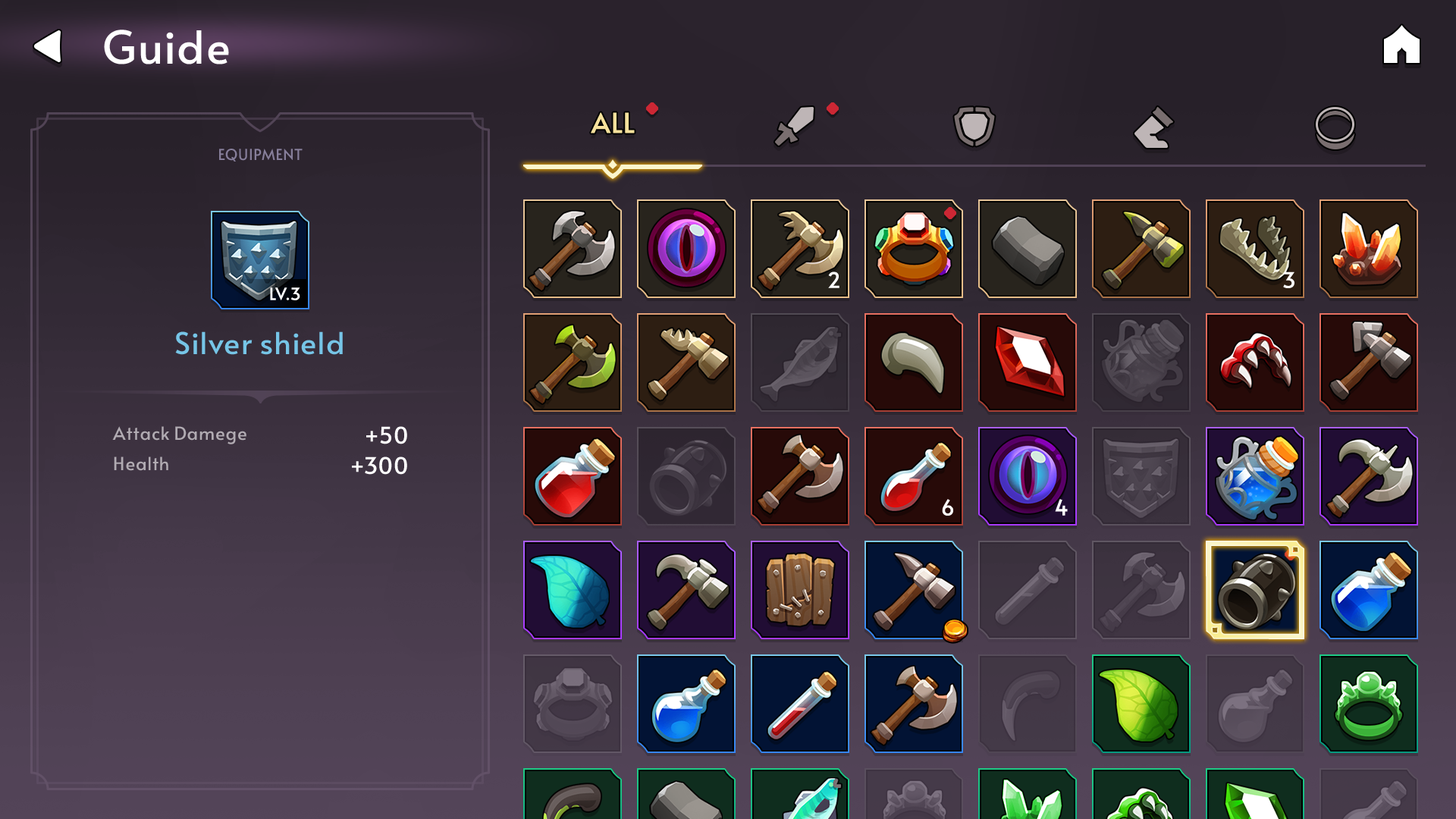
<style>
.page{position:relative;width:1456px;height:819px}
.page>*{position:absolute;margin:0}
.t1{font:45.5px "Alata-Regular";color:#ffffff}
.t2{font:27.3px "Alata-Regular";color:#f6e19c;text-transform:uppercase;font-weight:bold}
.t3{font:15.2px "Alata-Regular";color:#867e9a;text-transform:uppercase}
.t4{font:21.2px "Alata-Regular";letter-spacing:-0.01em;color:#ffffff}
.t5{font:16.7px "Alata-Regular";letter-spacing:-0.01em;color:#ffffff;text-transform:uppercase}
.t6{font:30.3px "Alata-Regular";color:#76c5e7}
.t7{font:18.2px/30.3px "Alata-Regular";color:#b1abb2}
.t8{font:22.7px/30.3px "Alata-Regular";color:#ffffff;text-transform:uppercase}
</style>
<div class="page">
<p class="t1" style="left:104px;top:30px;width:125px;height:34px">Guide</p>
<p class="t2" style="left:591px;top:112px;width:44px;height:21px">All</p>
<p class="t3" style="left:219px;top:149px;width:84px;height:13px">Equipment</p>
<p class="t4" style="left:828px;top:271px;width:11px;height:17px">2</p>
<p class="t4" style="left:1283px;top:271px;width:11px;height:17px">3</p>
<p class="t5" style="left:270px;top:287px;width:30px;height:13px">lv.3</p>
<p class="t6" style="left:175px;top:331px;width:168px;height:24px">Silver shield</p>
<p class="t7" style="left:112px;top:426px;width:134px;height:45px">Attack Damege<br>Health</p>
<p class="t8" style="left:352px;top:426px;width:55px;height:49px;text-align:right">+50<br>+300</p>
<p class="t4" style="left:942px;top:499px;width:11px;height:17px">6</p>
<p class="t4" style="left:1055px;top:499px;width:13px;height:17px">4</p>
</div>
